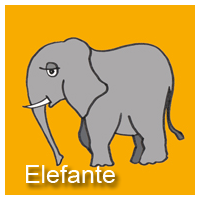
<style>
.page{position:relative;width:200px;height:200px;background:#f8ac00}
.page>*{position:absolute;margin:0}
.t1{font:25px "ArialMT";color:#ffffff}
</style>
<div class="page">
<p class="t1" style="left:26px;top:165px;width:89px;height:18px">Elefante</p>
</div>
